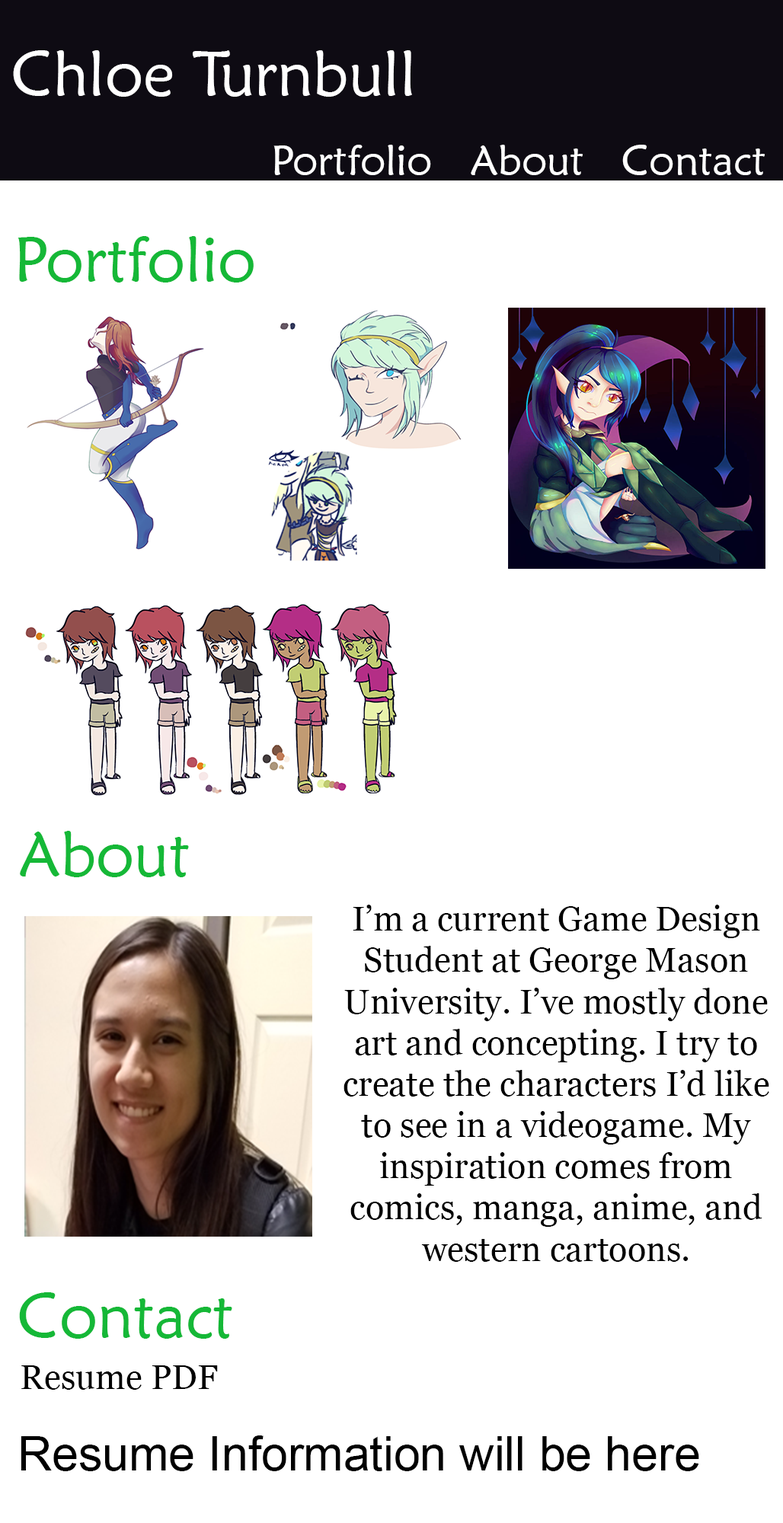
<style>
.page{position:relative;width:783px;height:1523px;background:#ffffff}
.page>*{position:absolute;margin:0}
.t1{font:63.5px "MaiandraGD-Regular";color:#ffffff}
.t2{font:42.3px "MaiandraGD-Regular";color:#ffffff}
.t3{font:63.5px "MaiandraGD-Regular";color:#15b837}
.t4{font:34.4px "Georgia";color:#000000}
.t5{font:47.6px "ArialMT";color:#000000}
</style>
<div class="page">
<p class="t1" style="left:13px;top:50px;width:399px;height:47px">Chloe Turnbull</p>
<p class="t2" style="left:273px;top:145px;width:492px;height:30px">Portfolio   About   Contact</p>
<p class="t3" style="left:18px;top:236px;width:236px;height:47px">Portfolio</p>
<p class="t3" style="left:20px;top:831px;width:169px;height:46px">About</p>
<p class="t4" style="left:343px;top:905px;width:426px;height:357px;text-align:center">I’m a current Game Design<br>Student at George Mason<br>University. I’ve mostly done<br>art and concepting. I try to<br>create the characters I’d like<br>to see in a videogame. My<br>inspiration comes from<br>comics, manga, anime, and<br>western cartoons.</p>
<p class="t3" style="left:19px;top:1292px;width:213px;height:47px">Contact</p>
<p class="t4" style="left:21px;top:1365px;width:197px;height:25px">Resume PDF</p>
<p class="t5" style="left:21px;top:1436px;width:678px;height:35px">Resume Information will be here</p>
</div>
